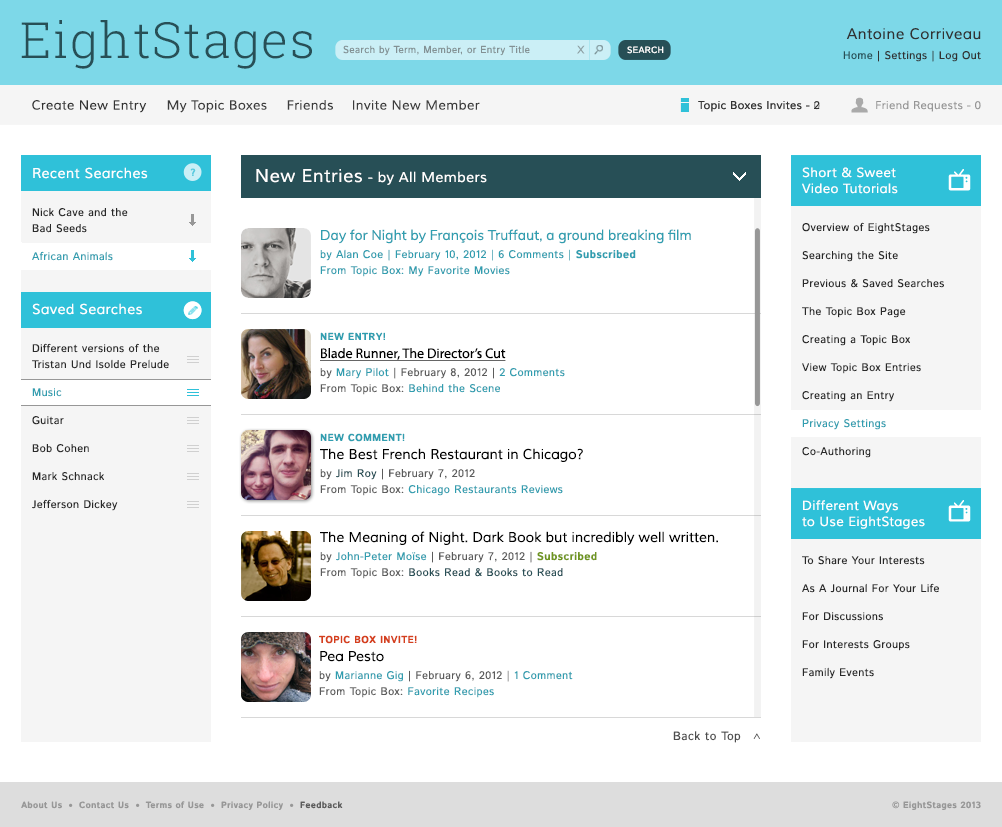
<style>
.page{position:relative;width:1002px;height:827px;background:#ffffff}
.page>*{position:absolute;margin:0}
.t1{font:50px "RobotoSlab-Light";letter-spacing:0.03em;color:#274f56}
.t2{font:15px "Muli";letter-spacing:0.03em;color:#323232}
.t3{font:10px "IstokWeb-Regular";letter-spacing:0.03em;color:#839194}
.t4{font:15px "ArialMT";letter-spacing:0.03em;color:#8fa1a4}
.t5{font:9px "IstokWeb-Regular";letter-spacing:0.03em;color:#ffffff}
.t6{font:11px "IstokWeb-Regular";letter-spacing:0.03em;color:#323232}
.t7{font:11px "IstokWeb-Regular";letter-spacing:0.03em;color:#274f56}
.t8{font:13px "Muli";letter-spacing:0.03em;color:#333333}
.t9{font:13px "Muli";letter-spacing:0.03em;color:#3c3c3c}
.t10{font:11px "Muli";letter-spacing:0.03em;color:#333333}
.t11{font:11px "Muli";letter-spacing:0.03em;color:#969696}
.t12{font:11px/14px "IstokWeb-Regular";letter-spacing:0.03em;color:#292929}
.t13{font:14px/22px "Muli";letter-spacing:0.03em;color:#ffffff}
.t14{font:11px/22px "IstokWeb-Regular";letter-spacing:0.03em;color:#292929}
.t15{font:11px/16px "IstokWeb-Regular";letter-spacing:0.03em;color:#292929}
.t16{font:11px/14px "IstokWeb-Regular";letter-spacing:0.03em;color:#309eb0}
.t17{font:14px/38px "Muli";letter-spacing:0.03em;color:#ffffff}
.t18{font:10.3px "IstokWeb-Bold";color:#5acbdf;scale:0.97 1}
.t19{font:14px "Muli";letter-spacing:0.03em;color:#ffffff}
.t20{font:18px "Muli";letter-spacing:0.03em;color:#ffffff}
.t21{font:13px/22px "Muli";letter-spacing:0.03em;color:#ffffff}
.t22{font:13px/16px "Muli";letter-spacing:0.03em;color:#ffffff}
.t23{font:13px/39px "Muli";letter-spacing:0.03em;color:#ffffff}
.t24{font:14px/18px "Muli-Regular";color:#309eb0}
.t25{font:11px/18px "IstokWeb-Regular";letter-spacing:0.03em;color:#309eb0}
.t26{font:11px/16px "IstokWeb-Bold";letter-spacing:0.03em;color:#309eb0}
.t27{font:11px/16px "IstokWeb-Regular";letter-spacing:0.03em;color:#309eb0}
.t28{font:14px/18px "MyriadPro-Regular";color:#000000;text-decoration:underline}
.t29{font:10px/16px "IstokWeb-Bold";letter-spacing:0.03em;color:#309eb0}
.t30{font:11px/18px "IstokWeb-Regular";letter-spacing:0.03em;color:#5c5c5c}
.t31{font:11px/16px "IstokWeb-Regular";letter-spacing:0.03em;color:#5c5c5c}
.t32{font:14px/18px "Muli";color:#000000}
.t33{font:11px/18px "IstokWeb-Regular";letter-spacing:0.03em;color:#274f56}
.t34{font:11px/16px "IstokWeb-Bold";letter-spacing:0.03em;color:#709620}
.t35{font:11px/16px "IstokWeb-Regular";letter-spacing:0.03em;color:#274f56}
.t36{font:10px/20px "IstokWeb-Bold";letter-spacing:0.03em;color:#d53f1c}
.t37{font:12px "IstokWeb-Regular";letter-spacing:0.03em;color:#4e4e4e}
.t38{font:10px "IstokWeb-Regular";letter-spacing:0.03em;color:#5d5d5d}
.t39{font:9px "IstokWeb-Bold";letter-spacing:0.03em;color:#979797}
.t40{font:9px "IstokWeb-Bold";letter-spacing:0.03em;color:#5c5c5c}
</style>
<div class="page">
<p class="t1" style="left:21px;top:20px;width:291px;height:49px">EightStages</p>
<p class="t2" style="left:846px;top:28px;width:135px;height:12px">Antoine Corriveau</p>
<p class="t3" style="left:343px;top:45px;width:187px;height:11px">Search by Term, Member, or Entry Title</p>
<p class="t4" style="left:577px;top:45px;width:8px;height:9px">x</p>
<p class="t5" style="left:627px;top:46px;width:37px;height:8px">SEARCH</p>
<p class="t6" style="left:843px;top:50px;width:138px;height:12px"><span class="t7">Home</span> | Settings | Log Out</p>
<p class="t8" style="left:32px;top:100px;width:115px;height:13px">Create New Entry</p>
<p class="t9" style="left:167px;top:100px;width:100px;height:13px">My Topic Boxes</p>
<p class="t9" style="left:287px;top:100px;width:46px;height:10px">Friends</p>
<p class="t9" style="left:353px;top:100px;width:127px;height:10px">Invite New Member</p>
<p class="t10" style="left:698px;top:101px;width:122px;height:11px">Topic Boxes Invites - 0</p>
<p class="t10" style="left:698px;top:101px;width:122px;height:11px">Topic Boxes Invites - 2</p>
<p class="t11" style="left:876px;top:100px;width:105px;height:12px">Friend Requests - 0</p>
<p class="t12" style="left:32px;top:167px;width:137px;height:344px"><span class="t13">Recent Searches<br><br></span><span class="t14">Nick Cave and the<br></span><span class="t15">Bad Seeds<br><br></span><span class="t16">African Animals<br><br></span><span class="t17">Saved Searches<br><br></span><span class="t14">Different versions of the<br></span><span class="t15">Tristan Und Isolde Prelude<br><br></span><span class="t16">Music<br></span><br>Guitar<br><br>Bob Cohen<br><br>Mark Schnack<br><br>Jefferson Dickey</p>
<p class="t18" style="left:190px;top:168px;width:6px;height:8px">?</p>
<p class="t19" style="left:256px;top:169px;width:231px;height:16px"><span class="t20">New Entries</span> - by All Members</p>
<p class="t12" style="left:802px;top:167px;width:142px;height:512px"><span class="t21">Short &amp; Sweet<br></span><span class="t22">Video Tutorials<br><br></span><span class="t14">Overview of EightStages<br><br></span>Searching the Site<br><br>Previous &amp; Saved Searches<br><br>The Topic Box Page<br><br>Creating a Topic Box<br><br>View Topic Box Entries<br><br>Creating an Entry<br><br><span class="t16">Privacy Settings<br></span><br>Co-Authoring<br><br><span class="t23">Different Ways<br></span><span class="t22">to Use EightStages<br><br></span><span class="t14">To Share Your Interests<br><br></span>As A Journal For Your Life<br><br>For Discussions<br><br>For Interests Groups<br><br>Family Events</p>
<p class="t24" style="left:320px;top:229px;width:371px;height:48px">Day for Night by François Truffaut, a ground breaking film<br><span class="t25">by Alan Coe | February 10, 2012 | 6 Comments | </span><span class="t26">Subscribed<br></span><span class="t27">From Topic Box: My Favorite Movies</span></p>
<p class="t28" style="left:320px;top:332px;width:245px;height:63px"><span class="t29">NEW ENTRY!<br></span>Blade Runner, The Director’s Cut<br><span class="t30">by </span><span class="t25">Mary Pilot</span><span class="t30"> | February 8, 2012 | </span><span class="t25">2 Comments<br></span><span class="t31">From Topic Box: </span><span class="t27">Behind the Scene</span></p>
<p class="t32" style="left:320px;top:433px;width:263px;height:63px"><span class="t29">NEW COMMENT!<br></span>The Best French Restaurant in Chicago?<br><span class="t30">by </span><span class="t33">Jim Roy</span><span class="t30"> | February 7, 2012<br></span><span class="t31">From Topic Box: </span><span class="t27">Chicago Restaurants Reviews</span></p>
<p class="t32" style="left:320px;top:531px;width:398px;height:48px">The Meaning of Night. Dark Book but incredibly well written.<br><span class="t30">by </span><span class="t25">John-Peter Moïse </span><span class="t30">| February 7, 2012 | </span><span class="t34">Subscribed<br></span><span class="t31">From Topic Box: </span><span class="t35">Books Read &amp; Books to Read</span></p>
<p class="t30" style="left:319px;top:635px;width:254px;height:63px"><span class="t36">TOPIC BOX INVITE!<br></span><span class="t32">Pea Pesto<br></span>by <span class="t25">Marianne Gig </span>| February 6, 2012 |<span class="t25"> 1 Comment<br></span><span class="t31">From Topic Box: </span><span class="t27">Favorite Recipes</span></p>
<p class="t37" style="left:673px;top:731px;width:68px;height:12px">Back to Top</p>
<p class="t38" style="left:753px;top:733px;width:7px;height:6px;rotate:-90deg">&gt;</p>
<p class="t39" style="left:21px;top:801px;width:322px;height:9px">About Us     Contact Us     Terms of Use     Privacy Policy     <span class="t40">Feedback</span></p>
<p class="t39" style="left:892px;top:801px;width:89px;height:9px">© EightStages 2013</p>
</div>
